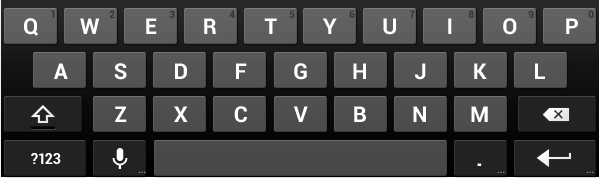
<style>
.page{position:relative;width:599px;height:178px}
.page>*{position:absolute;margin:0}
.t1{font:10px "Roboto-Bold";color:#282828}
.t2{font:22px "Roboto-Bold";color:#ffffff}
.t3{font:14px "Roboto-Bold";color:#ffffff}
.t4{font:10px "Roboto-Bold";letter-spacing:-0.025em;color:#848484}
.t5{font:24px "Roboto-Bold";color:#ffffff}
</style>
<div class="page">
<p class="t1" style="left:51px;top:10px;width:4px;height:8px;opacity:0.8">1</p>
<p class="t1" style="left:109px;top:10px;width:6px;height:8px;opacity:0.8">2</p>
<p class="t1" style="left:169px;top:10px;width:6px;height:8px;opacity:0.8">3</p>
<p class="t1" style="left:229px;top:10px;width:6px;height:8px;opacity:0.8">4</p>
<p class="t1" style="left:289px;top:10px;width:6px;height:8px;opacity:0.8">5</p>
<p class="t1" style="left:349px;top:10px;width:6px;height:8px;opacity:0.8">6</p>
<p class="t1" style="left:409px;top:10px;width:6px;height:8px;opacity:0.8">7</p>
<p class="t1" style="left:468px;top:10px;width:6px;height:8px;opacity:0.8">8</p>
<p class="t1" style="left:528px;top:10px;width:6px;height:8px;opacity:0.8">9</p>
<p class="t1" style="left:588px;top:10px;width:6px;height:8px;opacity:0.8">0</p>
<p class="t2" style="left:24px;top:18px;width:14px;height:18px">Q</p>
<p class="t2" style="left:80px;top:18px;width:19px;height:16px">W</p>
<p class="t2" style="left:146px;top:18px;width:11px;height:16px">E</p>
<p class="t2" style="left:204px;top:18px;width:13px;height:16px">R</p>
<p class="t2" style="left:264px;top:18px;width:13px;height:16px">T</p>
<p class="t2" style="left:323px;top:18px;width:14px;height:16px">Y</p>
<p class="t2" style="left:383px;top:18px;width:13px;height:17px">U</p>
<p class="t2" style="left:448px;top:18px;width:4px;height:16px">I</p>
<p class="t2" style="left:503px;top:18px;width:14px;height:17px">O</p>
<p class="t2" style="left:566px;top:18px;width:12px;height:16px">P</p>
<p class="t2" style="left:54px;top:63px;width:14px;height:16px">A</p>
<p class="t2" style="left:114px;top:63px;width:13px;height:17px">S</p>
<p class="t2" style="left:175px;top:63px;width:12px;height:16px">D</p>
<p class="t2" style="left:236px;top:63px;width:11px;height:16px">F</p>
<p class="t2" style="left:294px;top:63px;width:13px;height:17px">G</p>
<p class="t2" style="left:353px;top:63px;width:13px;height:16px">H</p>
<p class="t2" style="left:415px;top:63px;width:11px;height:17px">J</p>
<p class="t2" style="left:474px;top:63px;width:13px;height:16px">K</p>
<p class="t2" style="left:535px;top:63px;width:10px;height:16px">L</p>
<p class="t2" style="left:115px;top:106px;width:12px;height:16px">Z</p>
<p class="t2" style="left:174px;top:106px;width:14px;height:16px">X</p>
<p class="t2" style="left:234px;top:106px;width:13px;height:17px">C</p>
<p class="t2" style="left:293px;top:106px;width:15px;height:16px">V</p>
<p class="t2" style="left:354px;top:106px;width:12px;height:16px">B</p>
<p class="t2" style="left:413px;top:106px;width:13px;height:16px">N</p>
<p class="t2" style="left:471px;top:106px;width:17px;height:16px">M</p>
<p class="t3" style="left:31px;top:153px;width:30px;height:11px">?123</p>
<p class="t4" style="left:138px;top:171px;width:8px;height:2px">...</p>
<p class="t5" style="left:477px;top:163px;width:5px;height:3px">.</p>
<p class="t4" style="left:497px;top:171px;width:8px;height:2px">...</p>
<p class="t4" style="left:586px;top:171px;width:8px;height:2px">...</p>
</div>
